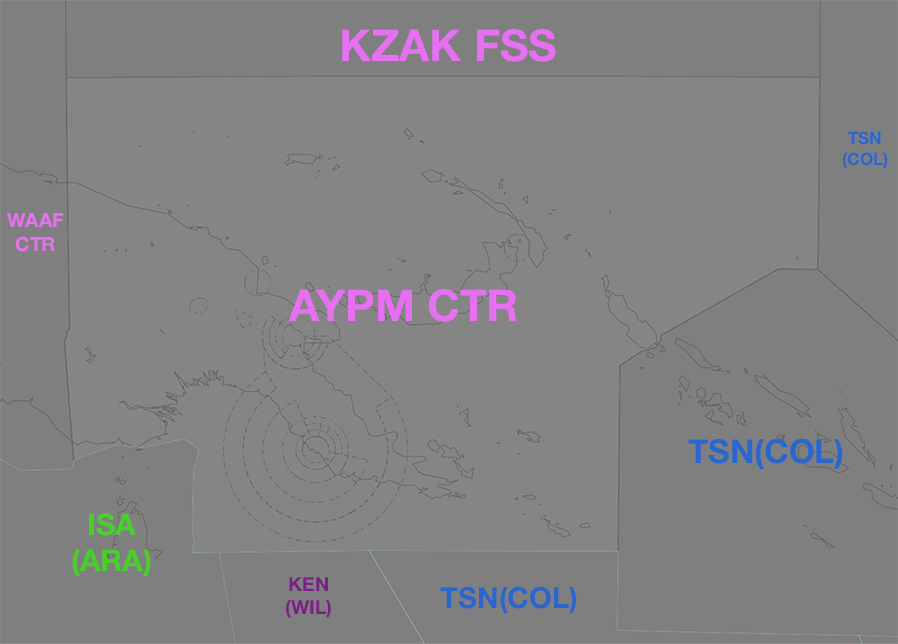
<style>
.page{position:relative;width:898px;height:644px;background:#858585}
.page>*{position:absolute;margin:0}
.t1{font:44.1px "HelveticaNeue-Bold";color:#e670f1}
.t2{font:17.1px "HelveticaNeue-Bold";color:#2967cf}
.t3{font:19.5px "HelveticaNeue-Bold";color:#e670f1}
.t4{font:33.2px "HelveticaNeue-Bold";color:#2967cf}
.t5{font:29.8px "HelveticaNeue-Bold";color:#48cf29}
.t6{font:19.5px "HelveticaNeue-Bold";color:#7e1e87}
.t7{font:29.2px "HelveticaNeue-Bold";color:#2967cf}
</style>
<div class="page">
<p class="t1" style="left:342px;top:29px;width:214px;height:33px">KZAK FSS</p>
<p class="t2" style="left:843px;top:131px;width:45px;height:37px;text-align:center">TSN<br>(COL)</p>
<p class="t3" style="left:7px;top:213px;width:57px;height:39px;text-align:center">WAAF<br>CTR</p>
<p class="t1" style="left:288px;top:289px;width:229px;height:33px">AYPM CTR</p>
<p class="t4" style="left:688px;top:438px;width:155px;height:31px">TSN(COL)</p>
<p class="t5" style="left:72px;top:513px;width:79px;height:64px;text-align:center">ISA<br>(ARA)</p>
<p class="t6" style="left:286px;top:577px;width:45px;height:41px;text-align:center">KEN<br>(WIL)</p>
<p class="t7" style="left:440px;top:586px;width:137px;height:28px">TSN(COL)</p>
</div>
